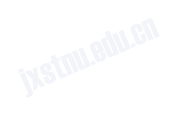
<style>
.page{position:relative;width:172px;height:113px;background:#ffffff}
.page>*{position:absolute;margin:0}
.t1{font:36px "Haettenschweiler";color:#f2f4f9}
</style>
<div class="page">
<p class="t1" style="left:18px;top:18px;width:142px;height:80px;rotate:-23deg">jxstnu.edu.cn</p>
</div>
